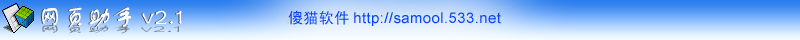
<style>
.page{position:relative;width:800px;height:40px}
.page>*{position:absolute;margin:0}
.t1{font:24px "FZSTK--GBK1-0";letter-spacing:0.025em}
.t2{font:24px "FZSTK--GBK1-0";letter-spacing:0.025em;color:#fdfdfd}
.t3{font:15px "ArialMT";letter-spacing:0.025em;color:#0143fe}
.t4{font:15px "SimHei";letter-spacing:0.025em;color:#0143fe}
.t5{font:10.5px "FZSTK--GBK1-0";letter-spacing:0.025em;color:#7b8493;scale:2.25 1}
</style>
<div class="page">
<p class="t1" style="left:41px;top:7px;width:140px;height:21px">网页助手v2.1</p>
<p class="t2" style="left:42px;top:7px;width:140px;height:21px">网页助手v2.1</p>
<p class="t3" style="left:288px;top:10px;width:213px;height:16px"><span class="t4">傻猫软件</span>http://samool.533.net</p>
<p class="t5" style="left:42px;top:24px;width:138px;height:10px">网页助手v2.1</p>
</div>
